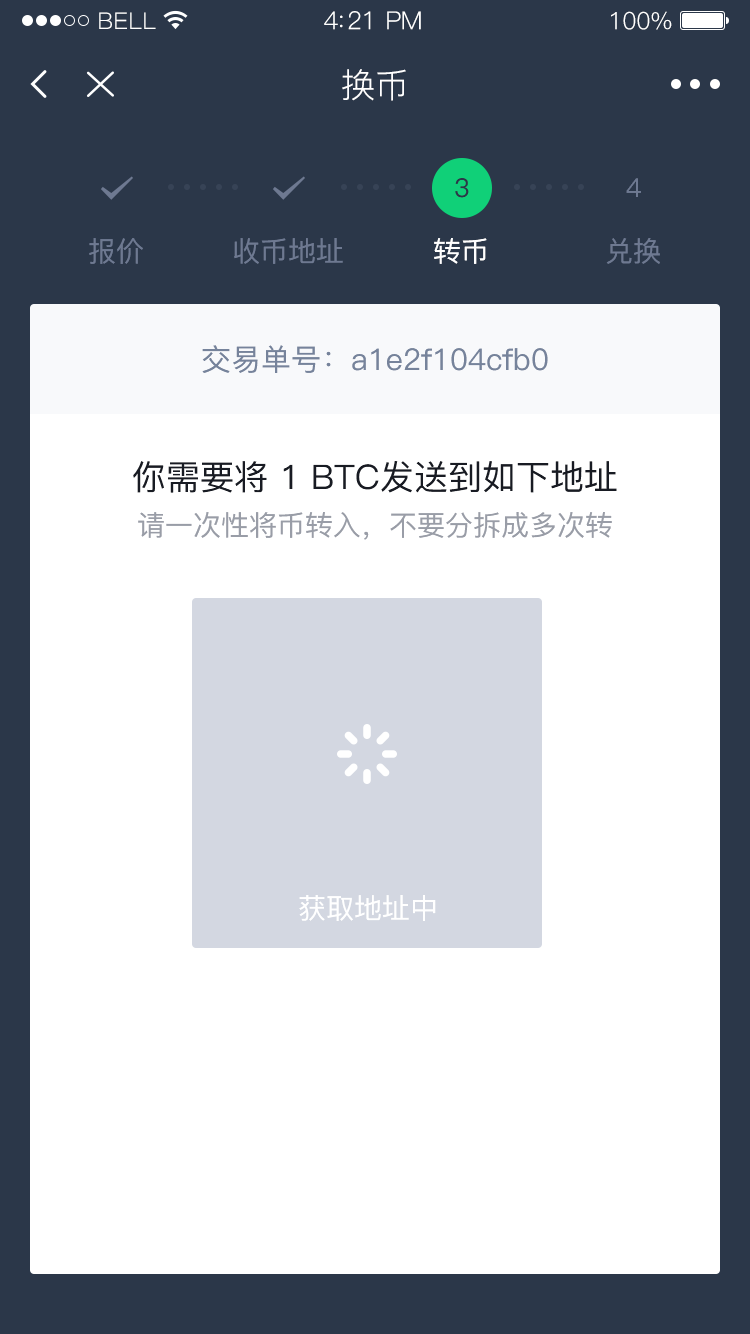
<style>
.page{position:relative;width:750px;height:1334px;background:#ffffff}
.page>*{position:absolute;margin:0}
.t1{font:23px "PingFang-SC-Regular";letter-spacing:0.02em;color:#ffffff}
.t2{font:25px "PingFang-SC-Regular";letter-spacing:-0.02em;color:#ffffff}
.t3{font:24px "PingFang-SC-Regular";letter-spacing:-0.02em;color:#ffffff}
.t4{font:34px "PingFang-SC-Regular";color:#ffffff}
.t5{font:26px "PingFang-SC-Medium";color:#2b3749}
.t6{font:26px "PingFang-SC-Medium";color:#6e7991}
.t7{font:28px "PingFang-SC-Medium";color:#6e7991}
.t8{font:28px "PingFang-SC-Medium";color:#ffffff}
.t9{font:30px "PingFang-SC-Medium";color:#76839b}
.t10{font:34px/46px "PingFang-SC-Medium";color:#181b23}
.t11{font:28px/46px "PingFang-SC-Medium";color:#999da7}
</style>
<div class="page">
<p class="t1" style="left:99px;top:12px;width:57px;height:17px">BELL</p>
<p class="t2" style="left:324px;top:11px;width:97px;height:19px">4:21 PM</p>
<p class="t3" style="left:611px;top:11px;width:61px;height:19px">100%</p>
<p class="t4" style="left:342px;top:69px;width:64px;height:32px">换币</p>
<p class="t5" style="left:455px;top:178px;width:14px;height:20px">3</p>
<p class="t6" style="left:626px;top:178px;width:15px;height:19px">4</p>
<p class="t7" style="left:89px;top:238px;width:54px;height:26px">报价</p>
<p class="t7" style="left:234px;top:238px;width:109px;height:26px">收币地址</p>
<p class="t8" style="left:434px;top:238px;width:53px;height:26px">转币</p>
<p class="t7" style="left:606px;top:238px;width:54px;height:26px">兑换</p>
<p class="t9" style="left:202px;top:345px;width:346px;height:28px">交易单号：a1e2f104cfb0</p>
<p class="t10" style="left:133px;top:461px;width:484px;height:79px;text-align:center">你需要将 1 BTC发送到如下地址<br><span class="t11">请一次性将币转入，不要分拆成多次转</span></p>
<p class="t8" style="left:299px;top:895px;width:137px;height:26px">获取地址中</p>
</div>
